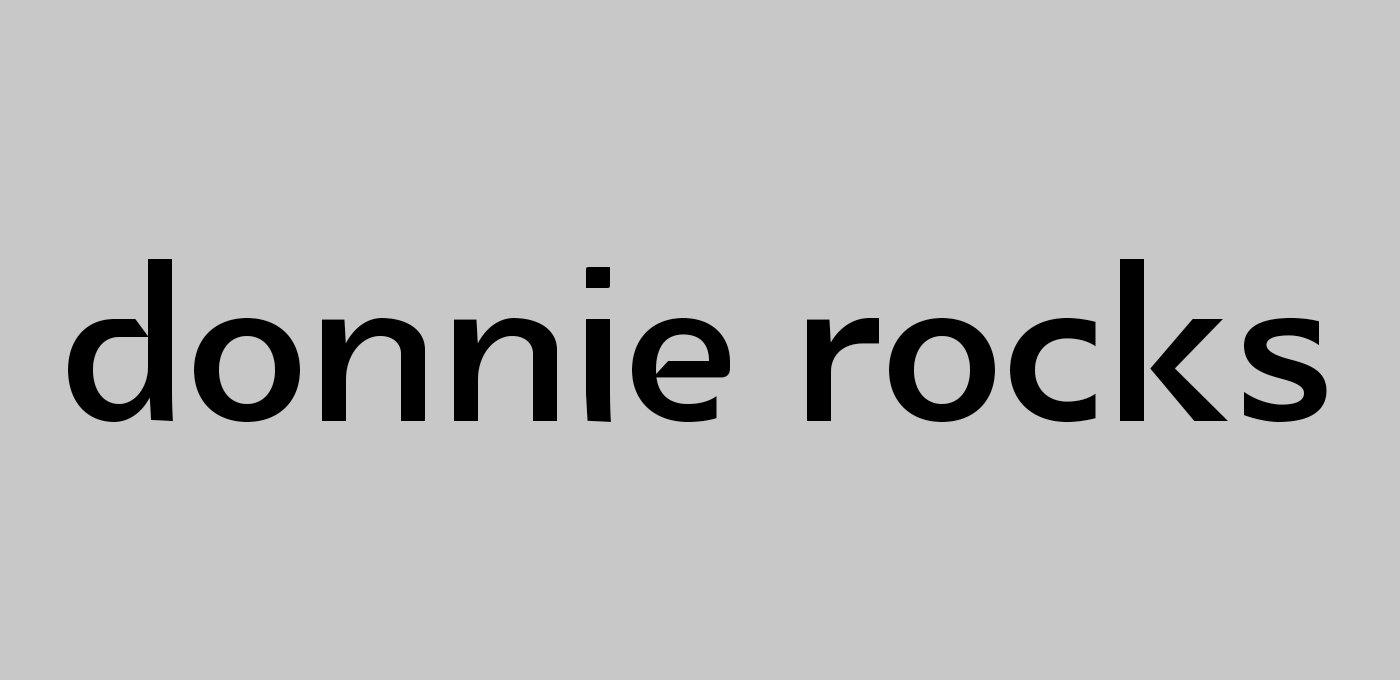
<style>
.page{position:relative;width:1400px;height:680px;background:#c9c8c8}
.page>*{position:absolute;margin:0}
.t1{font:300px "GlametrixBold";color:#000000}
</style>
<div class="page">
<p class="t1" style="left:68px;top:259px;width:1259px;height:164px">donnie rocks</p>
</div>
